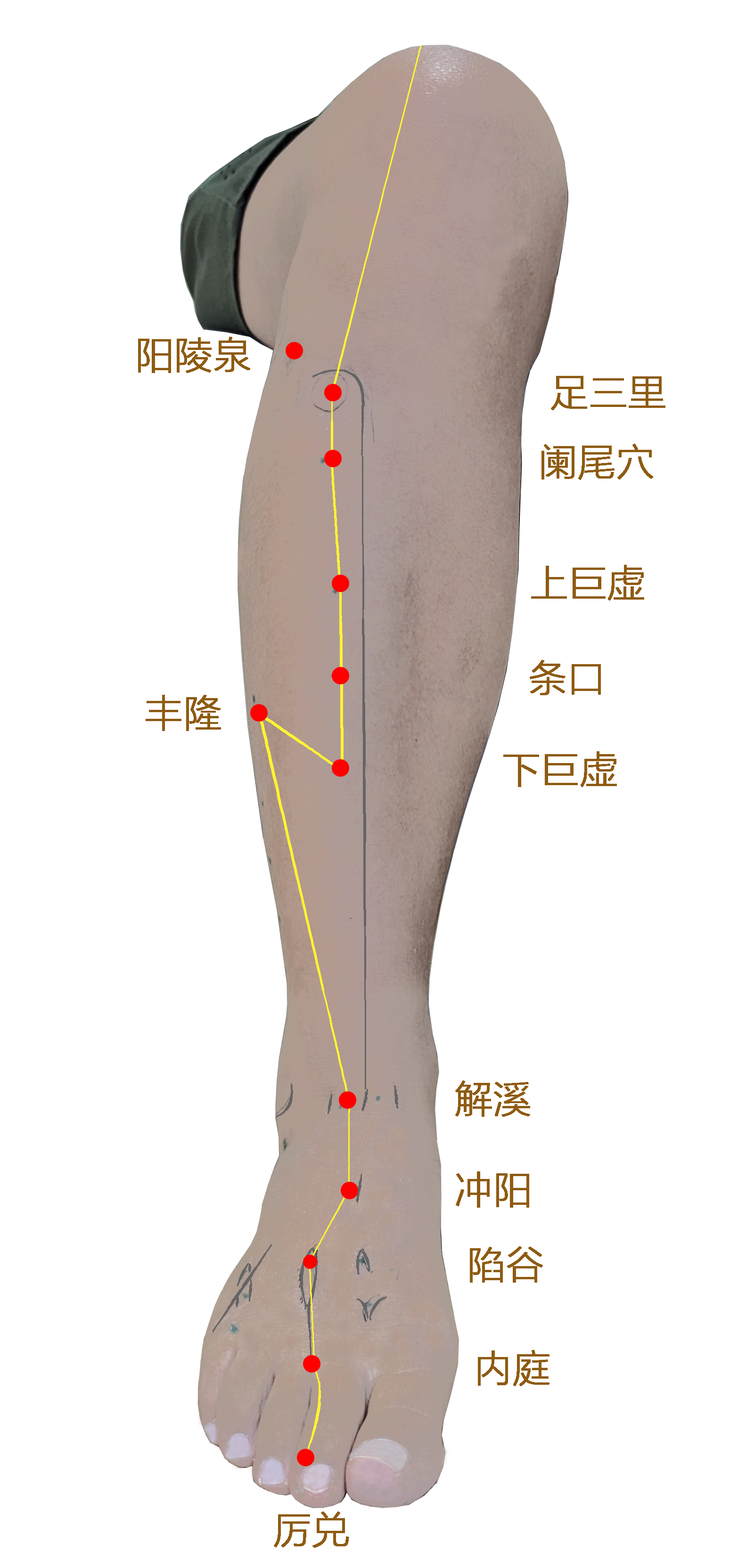
<style>
.page{position:relative;width:746px;height:1568px;background:#ffffff}
.page>*{position:absolute;margin:0}
.t1{font:37.7px "MicrosoftYaHeiLight";color:#8e5b12;font-weight:bold}
</style>
<div class="page">
<p class="t1" style="left:138px;top:337px;width:112px;height:36px">阳陵泉</p>
<p class="t1" style="left:551px;top:376px;width:114px;height:34px">足三里</p>
<p class="t1" style="left:541px;top:444px;width:112px;height:36px">阑尾穴</p>
<p class="t1" style="left:531px;top:565px;width:113px;height:36px">上巨虚</p>
<p class="t1" style="left:529px;top:660px;width:72px;height:35px">条口</p>
<p class="t1" style="left:146px;top:695px;width:75px;height:36px">丰隆</p>
<p class="t1" style="left:503px;top:751px;width:114px;height:36px">下巨虚</p>
<p class="t1" style="left:455px;top:1081px;width:75px;height:36px">解溪</p>
<p class="t1" style="left:455px;top:1171px;width:74px;height:37px">冲阳</p>
<p class="t1" style="left:470px;top:1246px;width:73px;height:37px">陷谷</p>
<p class="t1" style="left:478px;top:1350px;width:71px;height:36px">内庭</p>
<p class="t1" style="left:274px;top:1511px;width:75px;height:37px">厉兑</p>
</div>
